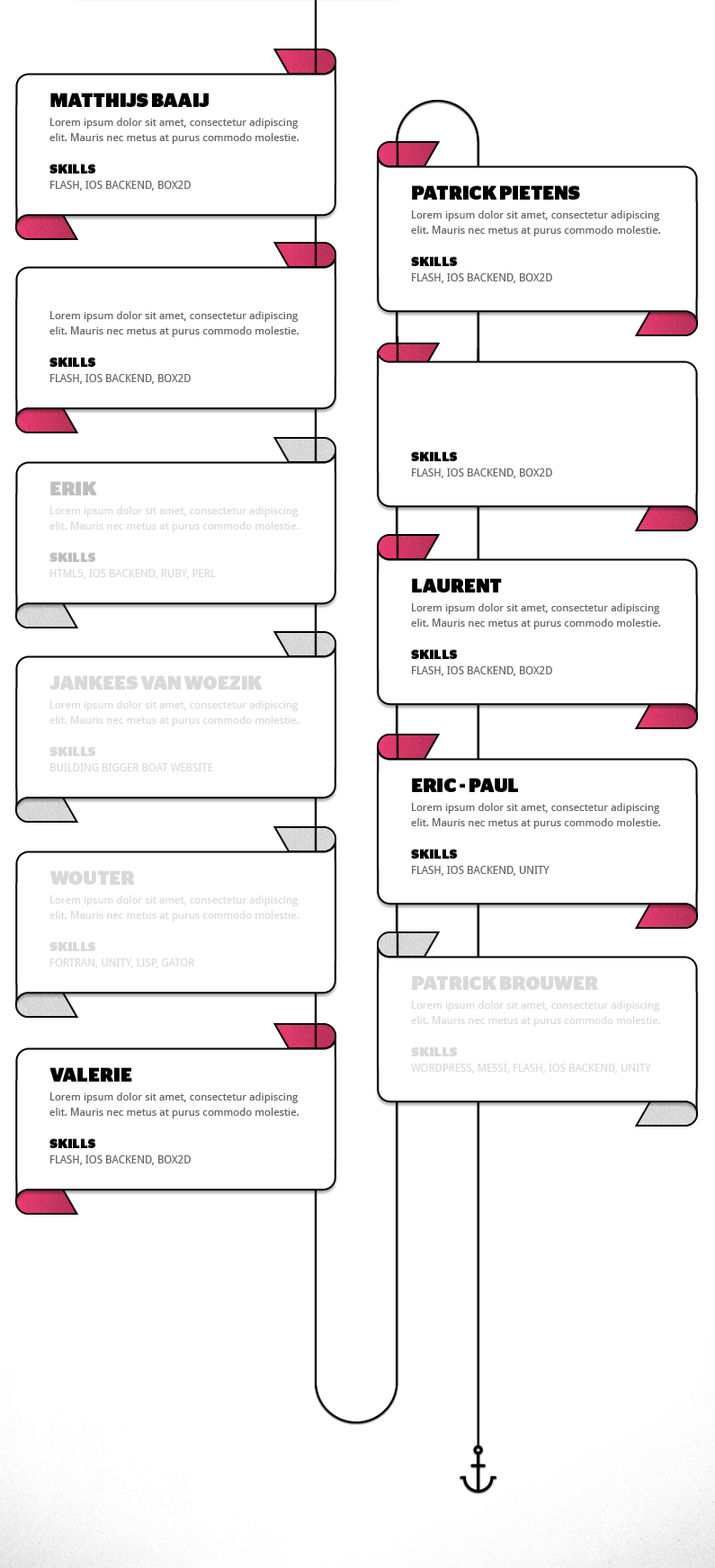
<style>
.page{position:relative;width:715px;height:1568px;background:#ffffff}
.page>*{position:absolute;margin:0}
.t1{font:18.9px "StagSans-Black";color:#010101;text-transform:uppercase}
.t2{font:10.8px/15.5px "DroidSans";color:#666666}
.t3{font:12.6px "StagSans-Black";letter-spacing:0.02em;color:#010101;text-transform:uppercase}
.t4{font:10.8px "DroidSans";color:#666666}
.t5{font:18.9px "StagSans-Black";color:#bfbfbf;text-transform:uppercase}
.t6{font:10.8px/15.5px "DroidSans";color:#d9d9d9}
.t7{font:12.6px "StagSans-Black";letter-spacing:0.02em;color:#bfbfbf;text-transform:uppercase}
.t8{font:10.8px "DroidSans";color:#d9d9d9}
.t9{font:18.9px "StagSans-Black";color:#d9d9d9;text-transform:uppercase}
.t10{font:12.6px "StagSans-Black";letter-spacing:0.02em;color:#d9d9d9;text-transform:uppercase}
</style>
<div class="page">
<p class="t1" style="left:50px;top:94px;width:159px;height:13px">Matthijs Baaij</p>
<p class="t2" style="left:49px;top:118px;width:249px;height:26px">Lorem ipsum dolor sit amet, consectetur adipiscing elit. Mauris nec metus at purus commodo molestie.</p>
<p class="t3" style="left:49px;top:165px;width:46px;height:9px">SKILLS</p>
<p class="t4" style="left:50px;top:181px;width:141px;height:10px">FLASH, IOS BACKEND, BOX2D</p>
<p class="t1" style="left:412px;top:186px;width:168px;height:14px">PATRICK PIETENS</p>
<p class="t2" style="left:411px;top:210px;width:249px;height:26px">Lorem ipsum dolor sit amet, consectetur adipiscing elit. Mauris nec metus at purus commodo molestie.</p>
<p class="t3" style="left:411px;top:257px;width:46px;height:9px">SKILLS</p>
<p class="t4" style="left:412px;top:273px;width:140px;height:10px">FLASH, IOS BACKEND, BOX2D</p>
<p class="t2" style="left:49px;top:311px;width:249px;height:26px">Lorem ipsum dolor sit amet, consectetur adipiscing elit. Mauris nec metus at purus commodo molestie.</p>
<p class="t3" style="left:49px;top:358px;width:46px;height:9px">SKILLS</p>
<p class="t4" style="left:50px;top:374px;width:141px;height:10px">FLASH, IOS BACKEND, BOX2D</p>
<p class="t3" style="left:411px;top:452px;width:46px;height:9px">SKILLS</p>
<p class="t4" style="left:412px;top:468px;width:140px;height:10px">FLASH, IOS BACKEND, BOX2D</p>
<p class="t5" style="left:50px;top:482px;width:47px;height:13px">ERIK</p>
<p class="t6" style="left:49px;top:506px;width:249px;height:26px">Lorem ipsum dolor sit amet, consectetur adipiscing elit. Mauris nec metus at purus commodo molestie.</p>
<p class="t7" style="left:49px;top:553px;width:46px;height:9px">SKILLS</p>
<p class="t8" style="left:50px;top:569px;width:166px;height:10px">HTML5, IOS BACKEND, RUBY, PERL</p>
<p class="t1" style="left:412px;top:579px;width:90px;height:13px">LAURENT</p>
<p class="t2" style="left:411px;top:603px;width:249px;height:26px">Lorem ipsum dolor sit amet, consectetur adipiscing elit. Mauris nec metus at purus commodo molestie.</p>
<p class="t3" style="left:411px;top:650px;width:46px;height:9px">SKILLS</p>
<p class="t9" style="left:49px;top:676px;width:214px;height:14px">JANKEES VAN WOEZIK</p>
<p class="t4" style="left:412px;top:666px;width:140px;height:10px">FLASH, IOS BACKEND, BOX2D</p>
<p class="t6" style="left:49px;top:700px;width:249px;height:26px">Lorem ipsum dolor sit amet, consectetur adipiscing elit. Mauris nec metus at purus commodo molestie.</p>
<p class="t10" style="left:49px;top:747px;width:46px;height:9px">SKILLS</p>
<p class="t8" style="left:50px;top:763px;width:163px;height:8px">BUILDING BIGGER BOAT WEBSITE</p>
<p class="t1" style="left:412px;top:779px;width:106px;height:13px">Eric - paul</p>
<p class="t2" style="left:411px;top:803px;width:249px;height:26px">Lorem ipsum dolor sit amet, consectetur adipiscing elit. Mauris nec metus at purus commodo molestie.</p>
<p class="t3" style="left:411px;top:850px;width:46px;height:9px">SKILLS</p>
<p class="t4" style="left:412px;top:866px;width:137px;height:10px">FLASH, IOS BACKEND, UNITY</p>
<p class="t9" style="left:50px;top:871px;width:85px;height:14px">WOUTER</p>
<p class="t6" style="left:49px;top:895px;width:249px;height:27px">Lorem ipsum dolor sit amet, consectetur adipiscing elit. Mauris nec metus at purus commodo molestie.</p>
<p class="t10" style="left:49px;top:942px;width:46px;height:9px">SKILLS</p>
<p class="t8" style="left:50px;top:958px;width:145px;height:10px">FORTRAN, UNITY, LISP, GATOR</p>
<p class="t9" style="left:412px;top:976px;width:186px;height:14px">patrick brouwer</p>
<p class="t6" style="left:411px;top:1001px;width:249px;height:26px">Lorem ipsum dolor sit amet, consectetur adipiscing elit. Mauris nec metus at purus commodo molestie.</p>
<p class="t10" style="left:411px;top:1047px;width:46px;height:9px">SKILLS</p>
<p class="t1" style="left:49px;top:1068px;width:83px;height:14px">VALErIE</p>
<p class="t8" style="left:411px;top:1064px;width:240px;height:10px">WORDPRESS, MESSI, FLASH, IOS BACKEND, UNITY</p>
<p class="t2" style="left:49px;top:1092px;width:249px;height:26px">Lorem ipsum dolor sit amet, consectetur adipiscing elit. Mauris nec metus at purus commodo molestie.</p>
<p class="t3" style="left:49px;top:1139px;width:46px;height:9px">SKILLS</p>
<p class="t4" style="left:50px;top:1155px;width:141px;height:10px">FLASH, IOS BACKEND, BOX2D</p>
</div>
